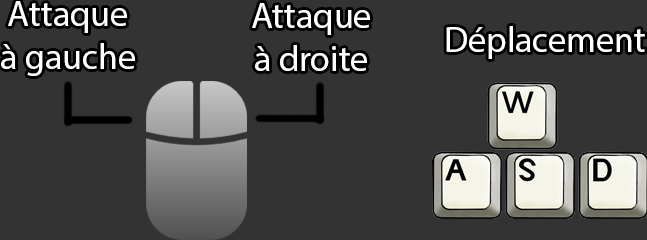
<style>
.page{position:relative;width:647px;height:240px;background:#333333}
.page>*{position:absolute;margin:0}
.t1{font:36px "MyriadPro-Regular";color:#ffffff}
</style>
<div class="page">
<p class="t1" style="left:1px;top:1px;width:134px;height:75px;text-align:center">Attaque<br>à gauche</p>
<p class="t1" style="left:252px;top:3px;width:118px;height:68px;text-align:center">Attaque<br>à droite</p>
<p class="t1" style="left:446px;top:26px;width:199px;height:33px">Déplacement</p>
</div>
